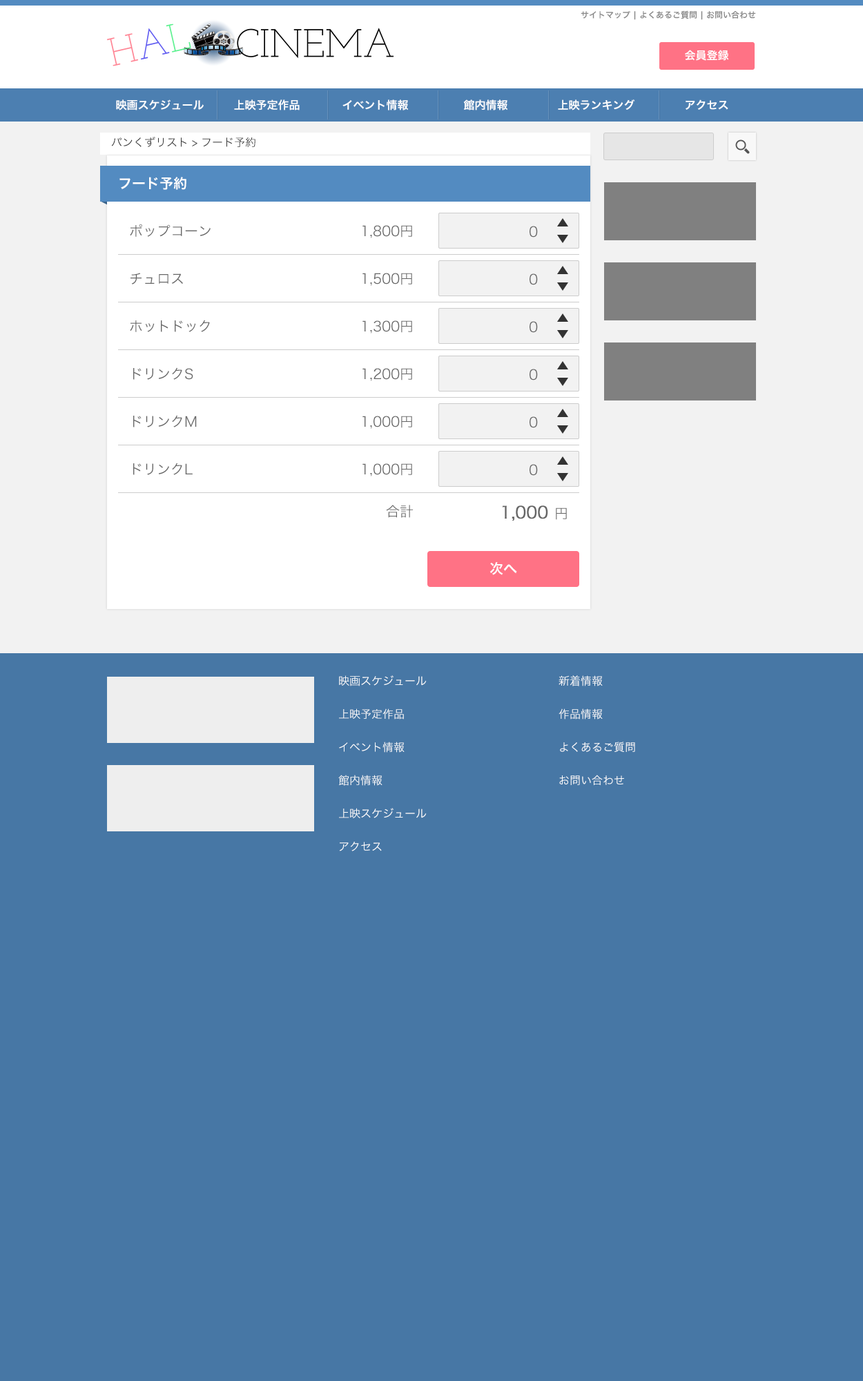
<style>
.page{position:relative;width:863px;height:1381px;background:#4777a5}
.page>*{position:absolute;margin:0}
.t1{font:8.3px "HiraKakuProN-W6";color:#888888}
.t2{font:11.1px "HiraKakuProN-W6";color:#ffffff}
.t3{font:11.1px "HiraKakuProN-W3";color:#333333}
.t4{font:13.8px "HiraKakuProN-W6";color:#ffffff}
.t5{font:13.8px "HiraKakuProN-W3";color:#666666}
.t6{font:16.6px "HiraKakuProN-W3";color:#666666;font-weight:bold}
.t7{font:11.1px/16.6px "HiraKakuProN-W3";color:#ffffff}
</style>
<div class="page">
<p class="t1" style="left:581px;top:10px;width:175px;height:10px">サイトマップ | よくあるご質問 | お問い合わせ</p>
<p class="t2" style="left:685px;top:50px;width:44px;height:11px">会員登録</p>
<p class="t2" style="left:116px;top:99px;width:88px;height:12px">映画スケジュール</p>
<p class="t2" style="left:234px;top:99px;width:66px;height:12px">上映予定作品</p>
<p class="t2" style="left:343px;top:99px;width:66px;height:12px">イベント情報</p>
<p class="t2" style="left:463px;top:99px;width:45px;height:12px">館内情報</p>
<p class="t2" style="left:558px;top:99px;width:77px;height:12px">上映ランキング</p>
<p class="t2" style="left:686px;top:99px;width:43px;height:11px">アクセス</p>
<p class="t3" style="left:111px;top:137px;width:145px;height:10px">パンくずリスト &gt; フード予約</p>
<p class="t4" style="left:119px;top:177px;width:67px;height:13px">フード予約</p>
<p class="t5" style="left:130px;top:224px;width:81px;height:13px">ポップコーン</p>
<p class="t5" style="left:363px;top:225px;width:49px;height:13px">1,800円</p>
<p class="t5" style="left:530px;top:226px;width:8px;height:12px">0</p>
<p class="t5" style="left:130px;top:273px;width:53px;height:12px">チュロス</p>
<p class="t5" style="left:363px;top:273px;width:49px;height:13px">1,500円</p>
<p class="t5" style="left:530px;top:273px;width:8px;height:12px">0</p>
<p class="t5" style="left:130px;top:320px;width:80px;height:12px">ホットドック</p>
<p class="t5" style="left:363px;top:320px;width:49px;height:14px">1,300円</p>
<p class="t5" style="left:530px;top:321px;width:8px;height:12px">0</p>
<p class="t5" style="left:133px;top:367px;width:60px;height:13px">ドリンクS</p>
<p class="t5" style="left:363px;top:368px;width:49px;height:13px">1,200円</p>
<p class="t5" style="left:530px;top:369px;width:8px;height:12px">0</p>
<p class="t5" style="left:133px;top:415px;width:64px;height:13px">ドリンクM</p>
<p class="t5" style="left:363px;top:416px;width:49px;height:13px">1,000円</p>
<p class="t5" style="left:530px;top:416px;width:8px;height:12px">0</p>
<p class="t5" style="left:133px;top:463px;width:60px;height:12px">ドリンクL</p>
<p class="t5" style="left:363px;top:463px;width:49px;height:14px">1,000円</p>
<p class="t5" style="left:530px;top:464px;width:8px;height:12px">0</p>
<p class="t5" style="left:386px;top:505px;width:28px;height:13px">合計</p>
<p class="t6" style="left:502px;top:506px;width:65px;height:15px">1,000 <span class="t5">円</span></p>
<p class="t4" style="left:490px;top:562px;width:27px;height:13px">次へ</p>
<p class="t7" style="left:338px;top:675px;width:89px;height:177px">映画スケジュール<br><br>上映予定作品<br><br>イベント情報<br><br>館内情報<br><br>上映スケジュール<br><br>アクセス</p>
<p class="t7" style="left:559px;top:675px;width:76px;height:110px">新着情報<br><br>作品情報<br><br>よくあるご質問<br><br>お問い合わせ</p>
</div>
